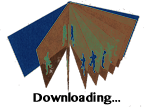
<style>
.page{position:relative;width:144px;height:107px;background:#ffffff}
.page>*{position:absolute;margin:0}
.t1{font:12px "OriyaMN-Bold";color:#000000}
</style>
<div class="page">
<p class="t1" style="left:33px;top:92px;width:88px;height:13px">Downloading...</p>
</div>
